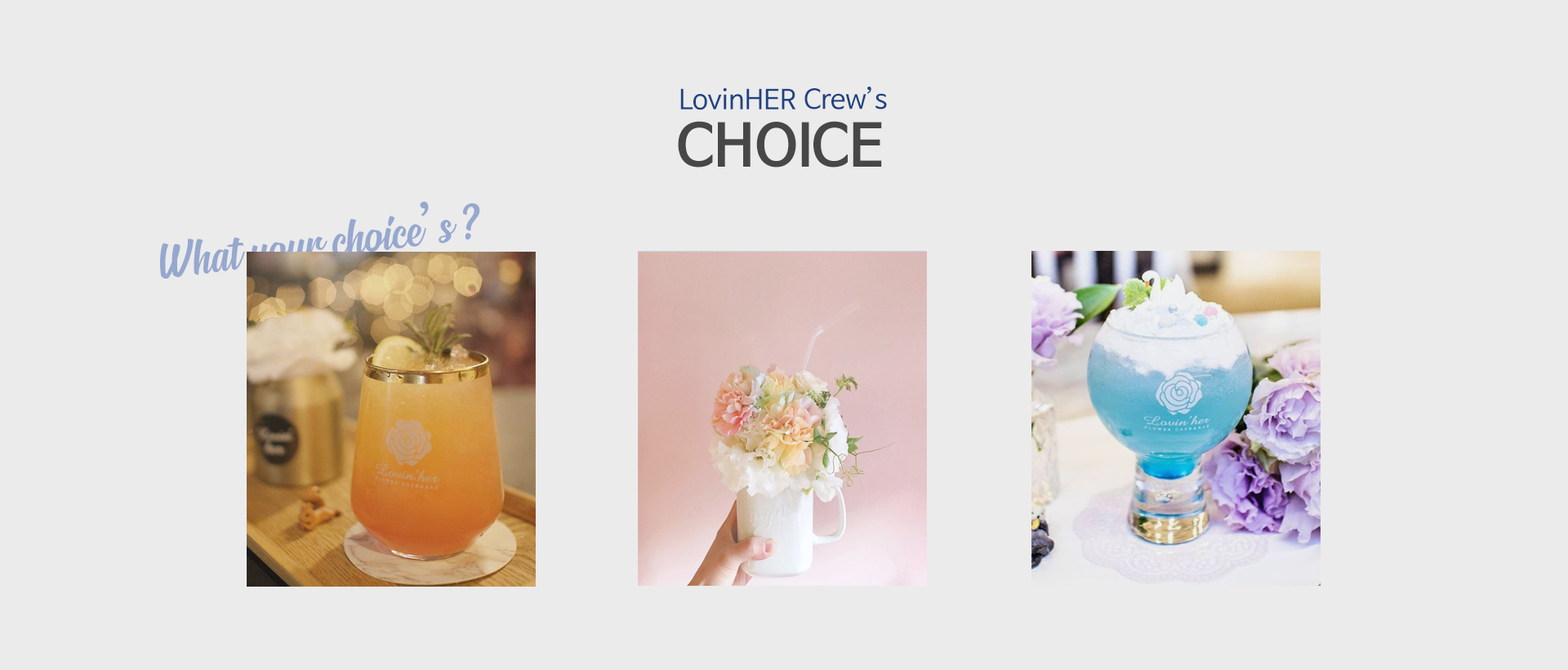
<style>
.page{position:relative;width:1568px;height:670px;background:#ebebeb}
.page>*{position:absolute;margin:0}
.t1{font:27px "NanumBarunGothic";color:#1f4383}
.t2{font:57.3px "NanumBarunGothicBold";color:#484848}
.t3{font:55px "SignatraDEMO";color:#97a8ce}
.t4{font:55px "NanumBarunGothic";color:#97a8ce}
</style>
<div class="page">
<p class="t1" style="left:680px;top:87px;width:116px;height:23px">LovinHER</p>
<p class="t1" style="left:804px;top:87px;width:83px;height:22px">Crew’s</p>
<p class="t2" style="left:678px;top:121px;width:204px;height:46px">CHOICE</p>
<p class="t3" style="left:160px;top:201px;width:320px;height:79px;rotate:-7deg">What your choice<span class="t4">’</span>s ?</p>
</div>
